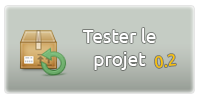
<style>
.page{position:relative;width:200px;height:100px;background:#c5ccc4}
.page>*{position:absolute;margin:0}
.t1{font:18.7px "Ubuntu-Regular";color:#ffffff}
.t2{font:16px "Ubuntu-Regular";color:#ffc600}
</style>
<div class="page">
<p class="t1" style="left:83px;top:28px;width:73px;height:42px;text-align:center">Tester le projet</p>
<p class="t2" style="left:155px;top:54px;width:21px;height:14px;rotate:-6deg">0.2</p>
</div>
